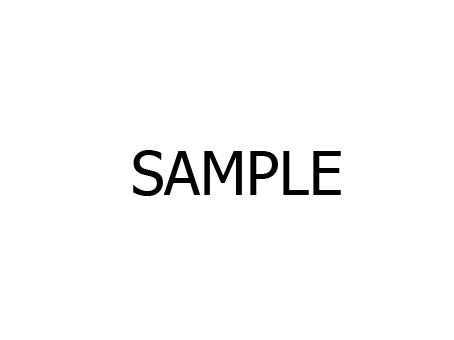
<style>
.page{position:relative;width:454px;height:340px;background:#ffffff}
.page>*{position:absolute;margin:0}
.t1{font:60px "Tahoma";color:#020202}
</style>
<div class="page">
<p class="t1" style="left:133px;top:150px;width:208px;height:46px">SAMPLE</p>
</div>
